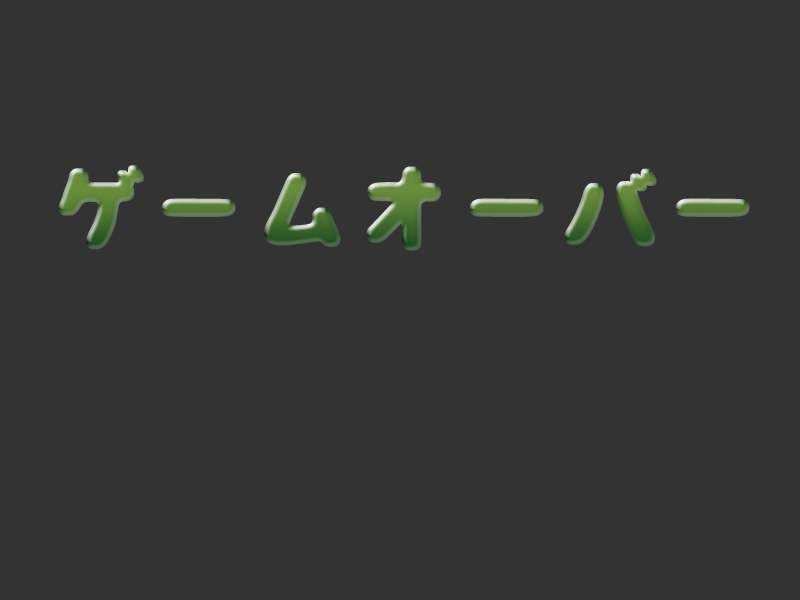
<style>
.page{position:relative;width:800px;height:600px;background:#333333}
.page>*{position:absolute;margin:0}
.t1{font:100px "mini-wakuwaku-maru";font-weight:bold}
</style>
<div class="page">
<p class="t1" style="left:58px;top:165px;width:692px;height:86px">ゲームオーバー</p>
</div>
